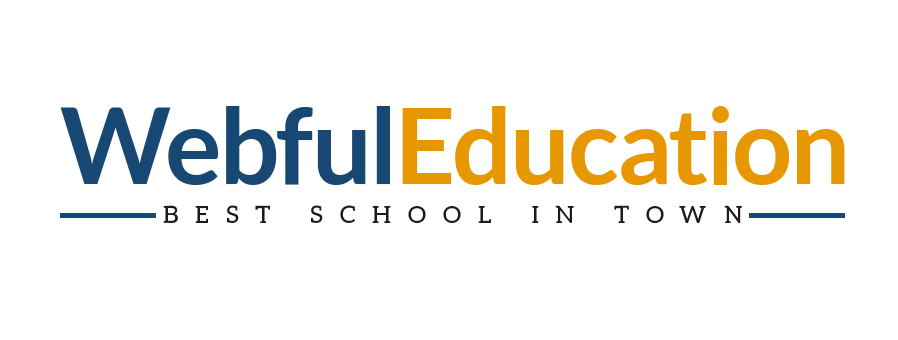
<style>
.page{position:relative;width:898px;height:340px;background:#ffffff}
.page>*{position:absolute;margin:0}
.t1{font:106px "Lato-Bold";color:#e79800}
.t2{font:106px "Lato-Bold";color:#174873}
.t3{font:24px "Aleo-Regular";letter-spacing:0.72em;color:#1b1b1b;text-transform:uppercase}
</style>
<div class="page">
<p class="t1" style="left:60px;top:106px;width:785px;height:79px"><span class="t2">Webful</span>Education</p>
<p class="t3" style="left:163px;top:205px;width:579px;height:18px">Best School In Town</p>
</div>
